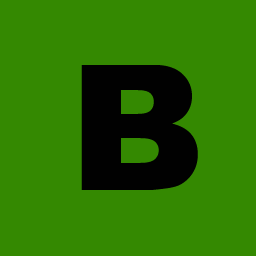
<style>
.page{position:relative;width:256px;height:256px;background:#348901}
.page>*{position:absolute;margin:0}
.t1{font:174.7px "Arial-Black";color:#010101}
</style>
<div class="page">
<p class="t1" style="left:81px;top:65px;width:117px;height:125px">B</p>
</div>
